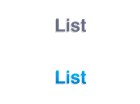
<style>
.page{position:relative;width:140px;height:104px;background:#ffffff}
.page>*{position:absolute;margin:0}
.t1{font:18px "Helvetica-Bold";color:#676d80}
.t2{font:18px "Helvetica-Bold"}
</style>
<div class="page">
<p class="t1" style="left:56px;top:18px;width:30px;height:14px">List</p>
<p class="t2" style="left:56px;top:70px;width:30px;height:14px">List</p>
</div>
